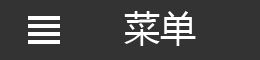
<style>
.page{position:relative;width:260px;height:60px;background:#333333}
.page>*{position:absolute;margin:0}
.t1{font:36px "MicrosoftYaHei";color:#ffffff}
</style>
<div class="page">
<p class="t1" style="left:124px;top:11px;width:72px;height:35px">菜单</p>
</div>
